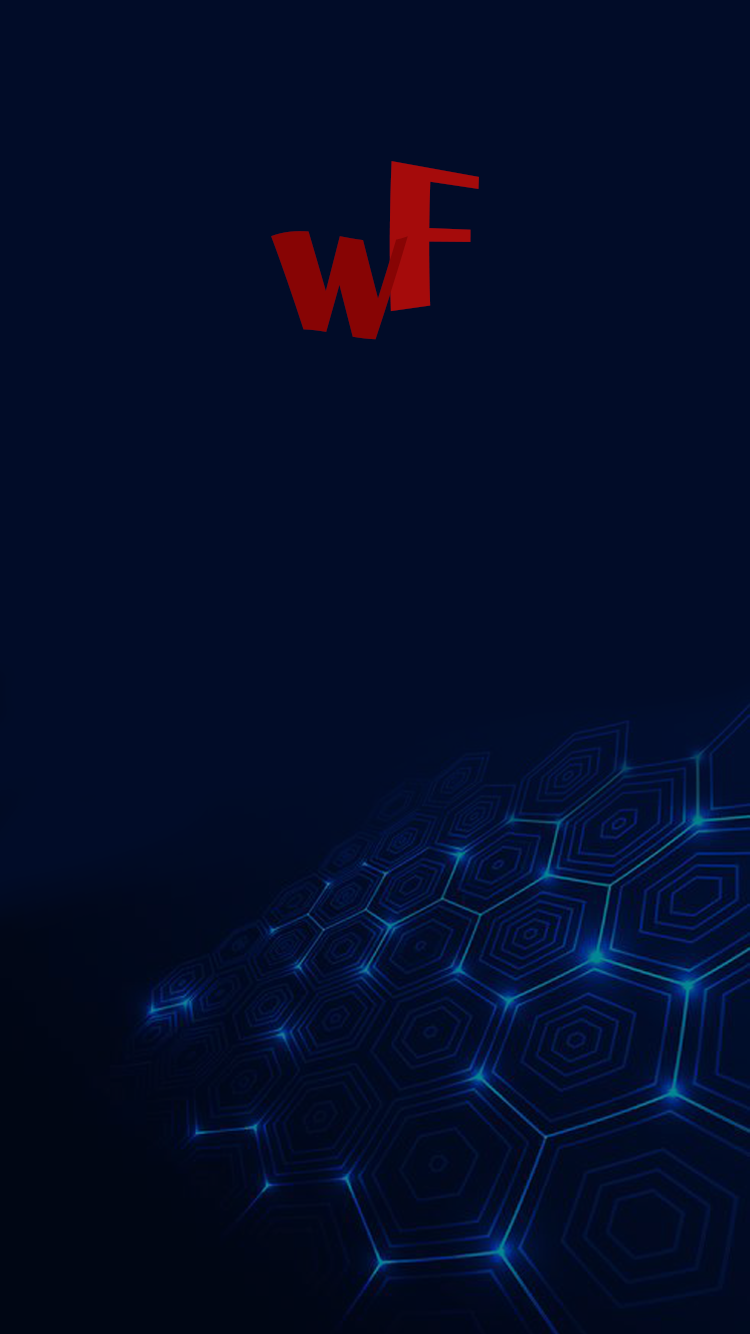
<style>
.page{position:relative;width:750px;height:1334px;background:#010c28}
.page>*{position:absolute;margin:0}
.t1{font:200px "BritannicBold";color:#a50b0b}
.t2{font:200px "BritannicBold";color:#870404}
</style>
<div class="page">
<p class="t1" style="left:389px;top:161px;width:90px;height:151px">F</p>
<p class="t2" style="left:271px;top:231px;width:137px;height:109px">w</p>
</div>
